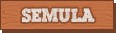
<style>
.page{position:relative;width:116px;height:33px}
.page>*{position:absolute;margin:0}
.t1{font:18px "ScribbleBoxDEMO";color:#f0e8e3}
</style>
<div class="page">
<p class="t1" style="left:22px;top:8px;width:73px;height:15px">SEMULA</p>
</div>
